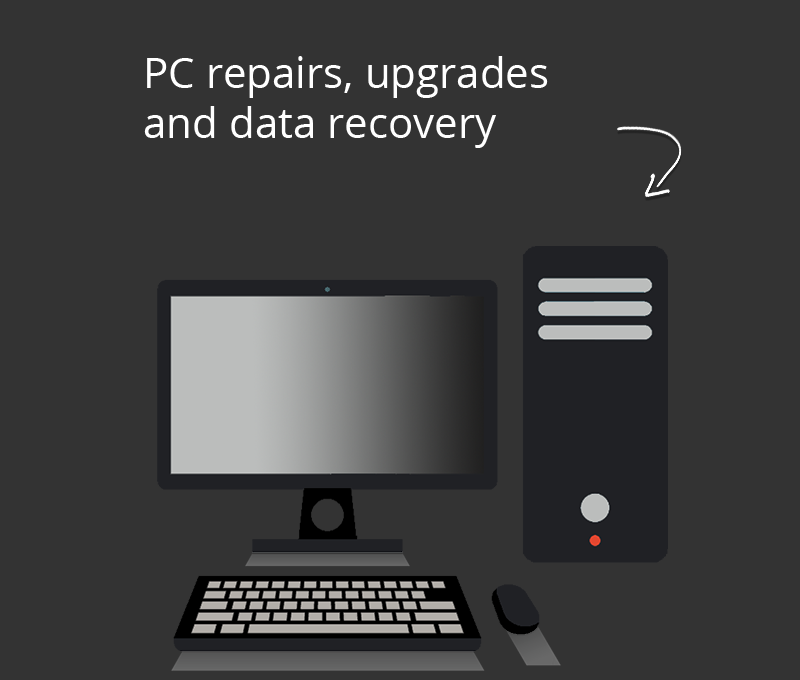
<style>
.page{position:relative;width:800px;height:680px;background:#333333}
.page>*{position:absolute;margin:0}
.t1{font:42px "OpenSans";color:#ffffff}
</style>
<div class="page">
<p class="t1" style="left:144px;top:56px;width:404px;height:92px">PC repairs, upgrades<br>and data recovery</p>
</div>
